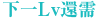
<style>
.page{position:relative;width:100px;height:18px;background:#ffffff}
.page>*{position:absolute;margin:0}
.t1{font:18px "RyuminPr6N-ExBold";color:#1cbbbf}
</style>
<div class="page">
<p class="t1" style="left:3px;top:0px;width:93px;height:18px">下一Lv還需</p>
</div>
